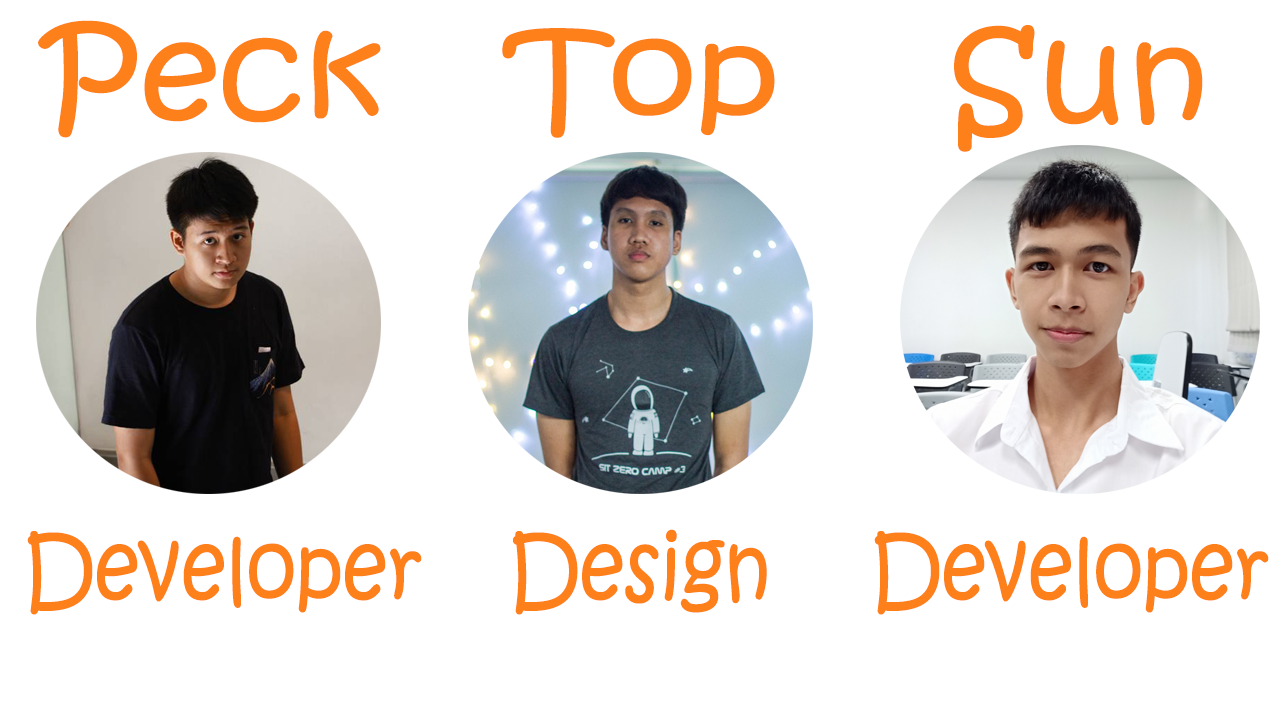
<style>
.page{position:relative;width:1280px;height:720px;background:#ffffff}
.page>*{position:absolute;margin:0}
.t1{font:126.2px "KristenITC-Regular";color:#fe801b;scale:1.11 1}
.t2{font:90px "KristenITC-Regular";color:#fe801b;scale:0.88 1}
</style>
<div class="page">
<p class="t1" style="left:38px;top:20px;width:343px;height:118px">Peck</p>
<p class="t1" style="left:502px;top:28px;width:273px;height:110px">Top</p>
<p class="t1" style="left:954px;top:25px;width:249px;height:127px">Sun</p>
<p class="t2" style="left:27px;top:531px;width:395px;height:84px">Developer</p>
<p class="t2" style="left:513px;top:529px;width:254px;height:86px">Design</p>
<p class="t2" style="left:874px;top:531px;width:395px;height:84px">Developer</p>
</div>
